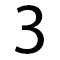
<style>
.page{position:relative;width:60px;height:60px;background:#ffffff}
.page>*{position:absolute;margin:0}
.t1{font:72px "MyriadPro-Regular";color:#000000}
</style>
<div class="page">
<p class="t1" style="left:14px;top:5px;width:30px;height:49px">3</p>
</div>
